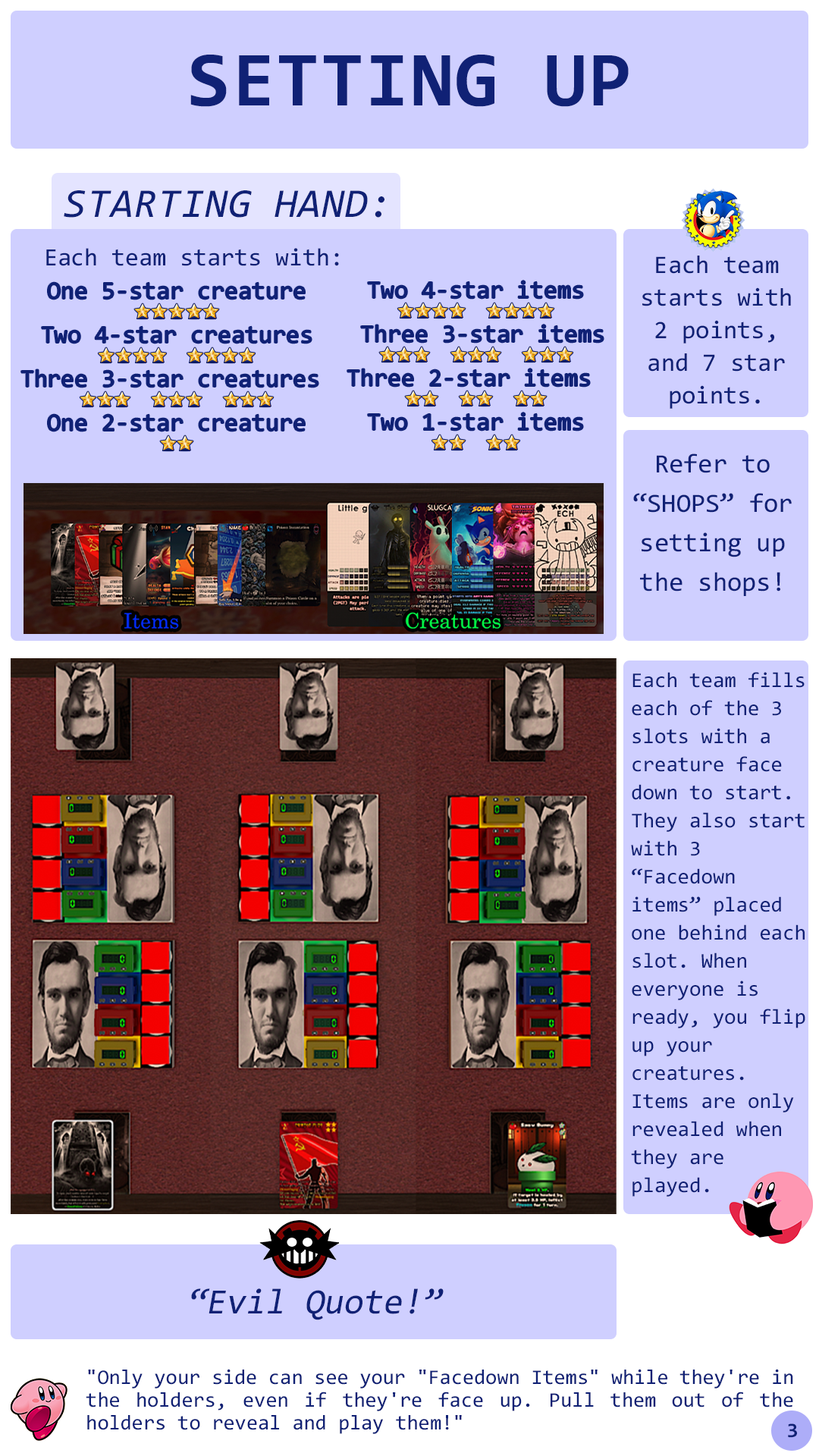
<style>
.page{position:relative;width:819px;height:1456px;background:#cfcfff}
.page>*{position:absolute;margin:0}
.t1{font:78.3px "Consolas-Bold";letter-spacing:0.02em;color:#102175}
.t2{font:41.1px "Consolas-Italic";letter-spacing:0.02em;color:#102175}
.t3{font:42.5px "Consolas";color:#102175}
.t4{font:43.2px/32.6px "Consolas";color:#102175}
.t5{font:42.5px/22px "Consolas"}
.t6{font:27.3px/22px "stoogedings-Regular"}
.t7{font:45.5px/39.4px "Consolas";color:#102175}
.t8{font:36.4px/28.1px "Consolas";color:#102175}
.t9{font:35.6px "Consolas";color:#102175;font-style:italic}
.t10{font:20.9px/22.7px "Consolas";color:#102175}
.t11{font:20.5px "Consolas-Bold";letter-spacing:-0.22em;color:#102175}
</style>
<div class="page">
<p class="t1" style="left:190px;top:55px;width:439px;height:52px">SETTING UP</p>
<p class="t2" style="left:64px;top:190px;width:320px;height:28px">STARTING HAND:</p>
<p class="t3" style="left:46px;top:248px;width:293px;height:18px">Each team starts with:</p>
<p class="t4" style="left:642px;top:256px;width:149px;height:153px;text-align:center">Each team starts with 2 points, and 7 star points.</p>
<p class="t5" style="left:347px;top:281px;width:257px;height:169px;text-align:center">Two 4-star items<br><span class="t6">★★★★ ★★★★<br></span> Three 3-star items<br><span class="t6">★★★ ★★★ ★★★<br></span>Three 2-star items <br><span class="t6">★★ ★★ ★★<br></span>Two 1-star items<br><span class="t6">★★ ★★</span></p>
<p class="t5" style="left:21px;top:282px;width:297px;height:169px;text-align:center">One 5-star creature<br><span class="t6">★★★★★<br></span>Two 4-star creatures<br><span class="t6">★★★★ ★★★★<br></span>Three 3-star creatures <br><span class="t6">★★★ ★★★ ★★★<br></span>One 2-star creature<br><span class="t6">★★</span></p>
<p class="t7" style="left:633px;top:453px;width:159px;height:143px;text-align:center">Refer to “SHOPS” for setting up the shops!</p>
<p class="t8" style="left:631px;top:672px;width:174px;height:525px">Each team fills each of the 3 slots with a creature face down to start. They also start with 3 “Facedown items” placed one behind each slot. When everyone is ready, you flip up your creatures. Items are only revealed when they are played.</p>
<p class="t9" style="left:191px;top:1288px;width:253px;height:32px">“Evil Quote!”</p>
<p class="t10" style="left:86px;top:1369px;width:707px;height:65px;text-align:justify">"Only your side can see your "Facedown Items" while they're in the holders, even if they're face up. Pull them out of the holders to reveal and play them!"</p>
<p class="t11" style="left:788px;top:1423px;width:9px;height:15px">3</p>
</div>
